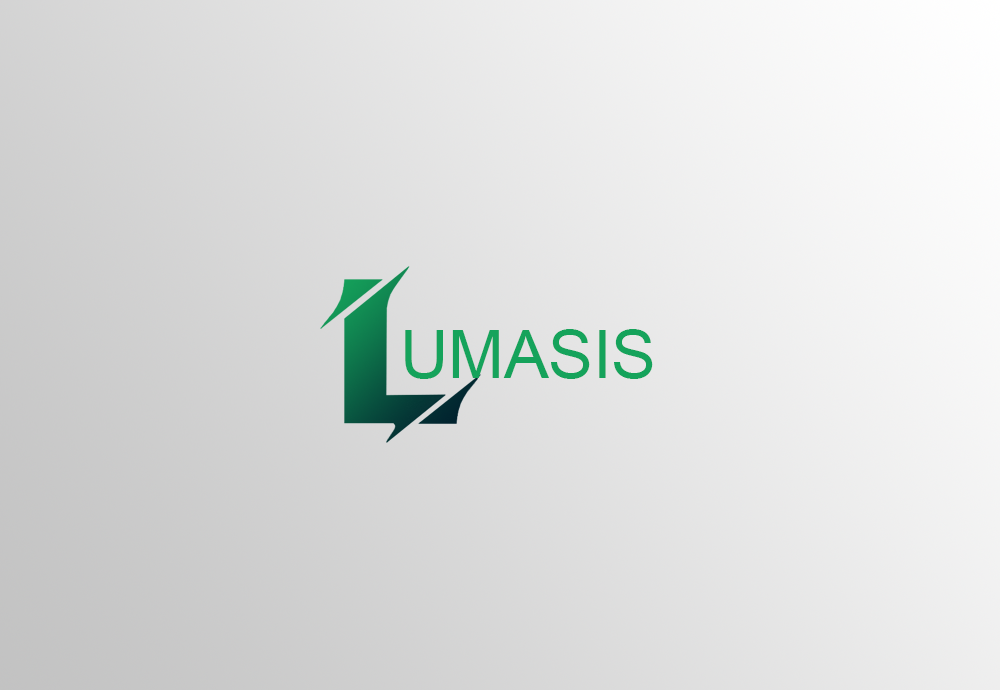
<style>
.page{position:relative;width:1000px;height:690px}
.page>*{position:absolute;margin:0}
.t1{font:66.7px "ArialMT";color:#15a35b}
</style>
<div class="page">
<p class="t1" style="left:405px;top:329px;width:248px;height:50px">UMASIS</p>
</div>
